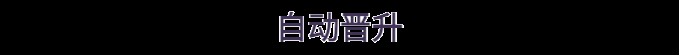
<style>
.page{position:relative;width:679px;height:55px;background:#000000}
.page>*{position:absolute;margin:0}
.t1{font:32px/32px "WebPSD-18463539-0-Regular";color:#3f3254;font-weight:bold}
</style>
<div class="page">
<p class="t1" style="left:0px;top:0px;width:679px;height:55px;text-align:center">自动晋升</p>
</div>
